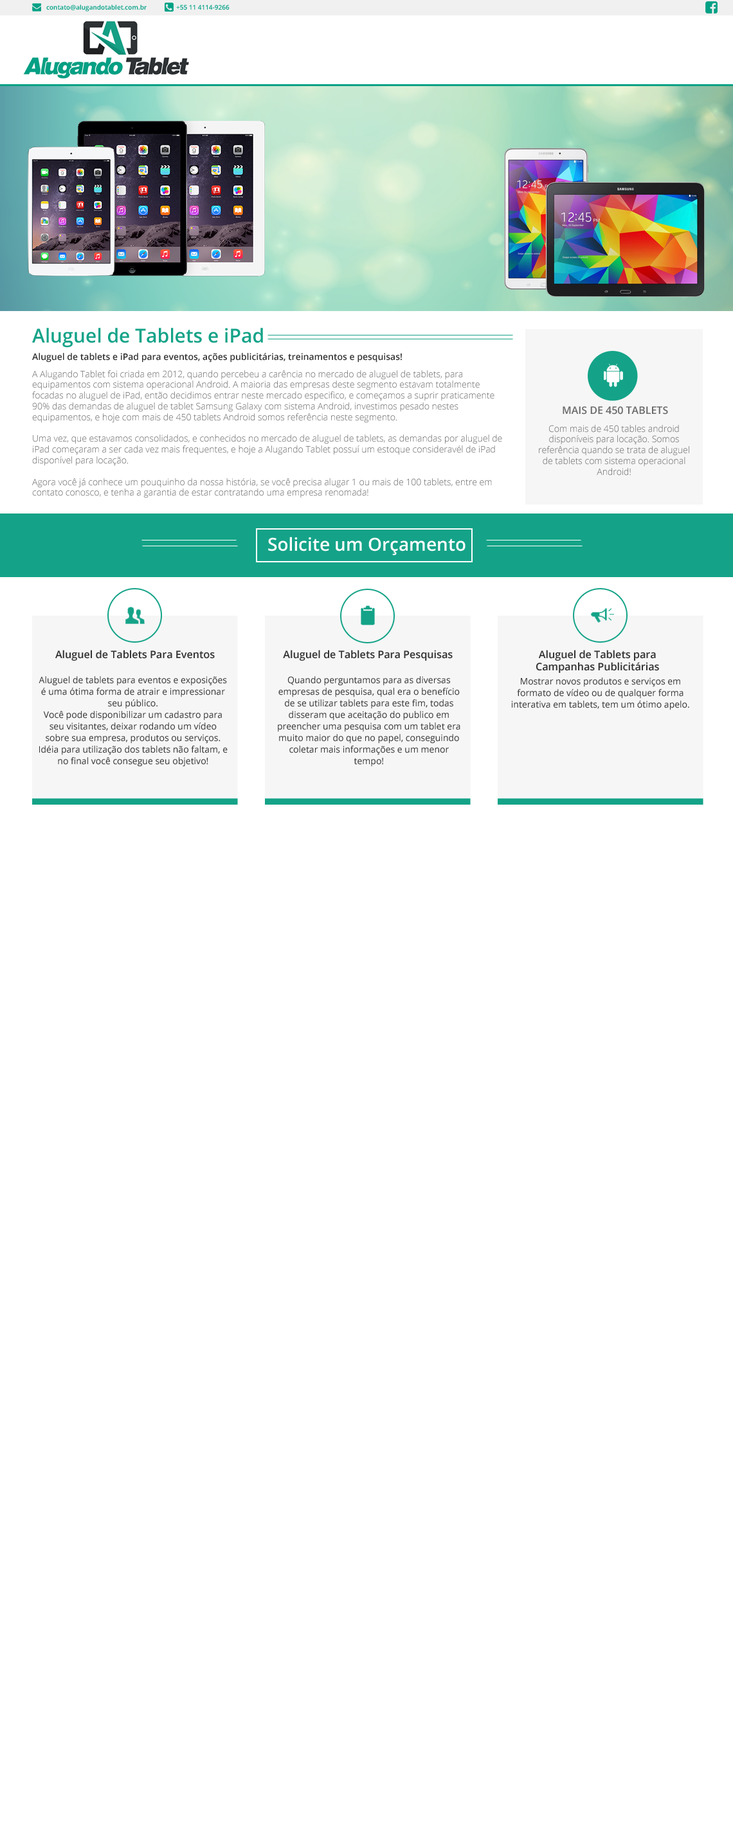
<style>
.page{position:relative;width:733px;height:1822px;background:#ffffff}
.page>*{position:absolute;margin:0}
.t1{font:6.4px "OpenSans-Semibold";color:#01a185}
.t2{font:6.4px "OpenSans-Semibold";color:#03a086}
.t3{font:19.3px "OpenSans-Semibold";color:#14a388}
.t4{font:9px "OpenSans-Semibold";color:#333333}
.t5{font:9px "OpenSans-Light";color:#696969}
.t6{font:10.3px "OpenSans-Semibold";color:#696969}
.t7{font:18px "OpenSans-Semibold";color:#ffffff}
.t8{font:10.4px "OpenSans-Semibold";color:#333333}
.t9{font:9px/11.6px "OpenSans";color:#333333}
</style>
<div class="page">
<p class="t1" style="left:46px;top:4px;width:101px;height:8px">contato@alugandotablet.com.br</p>
<p class="t2" style="left:176px;top:4px;width:53px;height:6px">+55 11 4114-9266</p>
<p class="t3" style="left:32px;top:328px;width:231px;height:20px">Aluguel de Tablets e iPad</p>
<p class="t4" style="left:32px;top:353px;width:370px;height:10px">Aluguel de tablets e iPad para eventos, ações publicitárias, treinamentos e pesquisas!</p>
<p class="t5" style="left:32px;top:370px;width:470px;height:128px">A Alugando Tablet foi criada em 2012, quando percebeu a carência no mercado de aluguel de tablets, para equipamentos com sistema operacional Android. A maioria das empresas deste segmento estavam totalmente focadas no aluguel de iPad, então decidimos entrar neste mercado especifico, e começamos a suprir praticamente 90% das demandas de aluguel de tablet Samsung Galaxy com sistema Android, investimos pesado nestes equipamentos, e hoje com mais de 450 tablets Android somos referência neste segmento.<br><br>Uma vez, que estavamos consolidados, e conhecidos no mercado de aluguel de tablets, as demandas por aluguel de iPad começaram a ser cada vez mais frequentes, e hoje a Alugando Tablet possuí um estoque consideravél de iPad disponível para locação.<br><br>Agora você já conhece um pouquinho da nossa história, se você precisa alugar 1 ou mais de 100 tablets, entre em contato conosco, e tenha a garantia de estar contratando uma empresa renomada!</p>
<p class="t6" style="left:562px;top:406px;width:106px;height:9px">MAIS DE 450 TABLETS</p>
<p class="t5" style="left:539px;top:425px;width:150px;height:51px;text-align:center">Com mais de 450 tables android disponíveis para locação. Somos referência quando se trata de aluguel de tablets com sistema operacional Android!</p>
<p class="t7" style="left:268px;top:537px;width:197px;height:18px">Solicite um Orçamento</p>
<p class="t8" style="left:55px;top:650px;width:160px;height:11px">Aluguel de Tablets Para Eventos</p>
<p class="t8" style="left:283px;top:650px;width:170px;height:11px">Aluguel de Tablets Para Pesquisas</p>
<p class="t8" style="left:536px;top:650px;width:123px;height:23px;text-align:center">Aluguel de Tablets para Campanhas Publicitárias</p>
<p class="t9" style="left:39px;top:676px;width:189px;height:91px;text-align:center">Aluguel de tablets para eventos e exposições é uma ótima forma de atrair e impressionar seu público.<br>Você pode disponibilizar um cadastro para seu visitantes, deixar rodando um vídeo sobre sua empresa, produtos ou serviços. Idéia para utilização dos tablets não faltam, e no final você consegue seu objetivo!</p>
<p class="t9" style="left:278px;top:676px;width:182px;height:91px;text-align:center">Quando perguntamos para as diversas empresas de pesquisa, qual era o benefício de se utilizar tablets para este fim, todas disseram que aceitação do publico em preencher uma pesquisa com um tablet era muito maior do que no papel, conseguindo coletar mais informações e um menor tempo!</p>
<p class="t9" style="left:511px;top:678px;width:178px;height:32px;text-align:center">Mostrar novos produtos e serviços em formato de vídeo ou de qualquer forma interativa em tablets, tem um ótimo apelo.</p>
</div>
